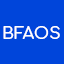
<style>
.page{position:relative;width:64px;height:64px;background:#0045da}
.page>*{position:absolute;margin:0}
.t1{font:16.7px "Comfortaa-Bold";color:#ffffff}
</style>
<div class="page">
<p class="t1" style="left:3px;top:26px;width:57px;height:13px">BFAOS</p>
</div>
